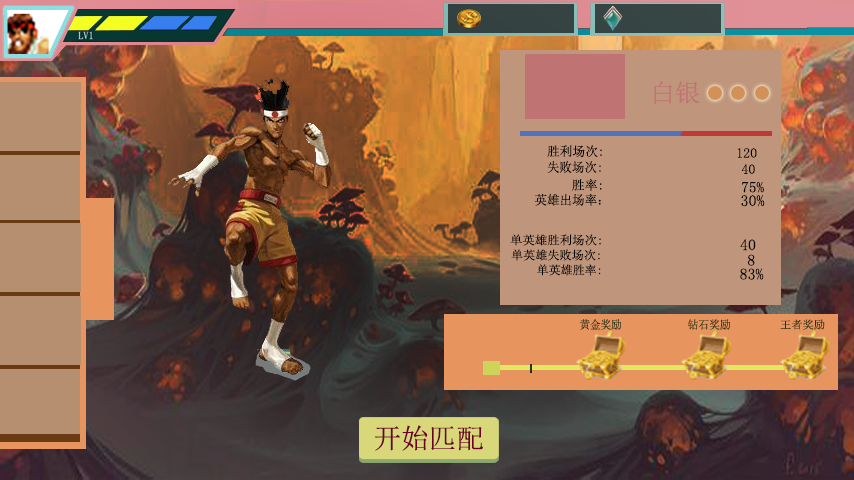
<style>
.page{position:relative;width:854px;height:480px}
.page>*{position:absolute;margin:0}
.t1{font:25px "SimSun";color:#bf7373}
.t2{font:12.9px "SimSun";color:#000000}
.t3{font:14px "SimSun";color:#000000}
.t4{font:12.9px "SimSun";color:#000000;scale:0.97 1}
.t5{font:15px "SimSun";color:#000000}
.t6{font:16px "SimSun";color:#000000}
.t7{font:12px "SimSun";color:#000000;scale:1.04 1}
.t8{font:12px "SimSun";color:#000000}
.t9{font:11.5px "SimSun";color:#243315;scale:0.92 1}
.t10{font:11.5px "SimSun";color:#243315;scale:0.94 1}
.t11{font:11px "SimSun";color:#243315}
.t12{font:27.6px "SimSun";color:#6c0029}
</style>
<div class="page">
<p class="t1" style="left:654px;top:81px;width:45px;height:23px">白银</p>
<p class="t2" style="left:547px;top:145px;width:55px;height:13px">胜利场次:</p>
<p class="t3" style="left:737px;top:148px;width:20px;height:10px">120</p>
<p class="t4" style="left:547px;top:161px;width:54px;height:13px">失败场次:</p>
<p class="t3" style="left:741px;top:164px;width:14px;height:10px">40</p>
<p class="t2" style="left:572px;top:178px;width:30px;height:13px">胜率:</p>
<p class="t5" style="left:742px;top:182px;width:22px;height:11px">75%</p>
<p class="t2" style="left:534px;top:193px;width:67px;height:13px">英雄出场率：</p>
<p class="t6" style="left:741px;top:195px;width:24px;height:12px">30%</p>
<p class="t7" style="left:510px;top:234px;width:91px;height:12px">单英雄胜利场次:</p>
<p class="t6" style="left:740px;top:239px;width:16px;height:12px">40</p>
<p class="t8" style="left:511px;top:249px;width:89px;height:12px">单英雄失败场次:</p>
<p class="t6" style="left:747px;top:254px;width:8px;height:12px">8</p>
<p class="t8" style="left:537px;top:264px;width:64px;height:12px">单英雄胜率:</p>
<p class="t6" style="left:740px;top:268px;width:24px;height:12px">83%</p>
<p class="t9" style="left:580px;top:319px;width:42px;height:11px">黄金奖励</p>
<p class="t10" style="left:688px;top:319px;width:42px;height:11px">钻石奖励</p>
<p class="t11" style="left:780px;top:319px;width:45px;height:11px">王者奖励</p>
<p class="t12" style="left:374px;top:425px;width:109px;height:26px">开始匹配</p>
</div>
